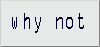
<style>
.page{position:relative;width:100px;height:47px;background:#e7e8e8}
.page>*{position:absolute;margin:0}
.t1{font:25.1px "OCRAExtended";letter-spacing:0.075em;color:#05032a;scale:0.65 1}
</style>
<div class="page">
<p class="t1" style="left:12px;top:13px;width:72px;height:20px">why not</p>
</div>
